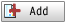
<style>
.page{position:relative;width:66px;height:22px}
.page>*{position:absolute;margin:0}
.t1{font:11.2px "Tahoma";letter-spacing:0.1em;color:#000000;scale:0.86 1}
</style>
<div class="page">
<p class="t1" style="left:29px;top:6px;width:19px;height:10px">Add</p>
</div>
